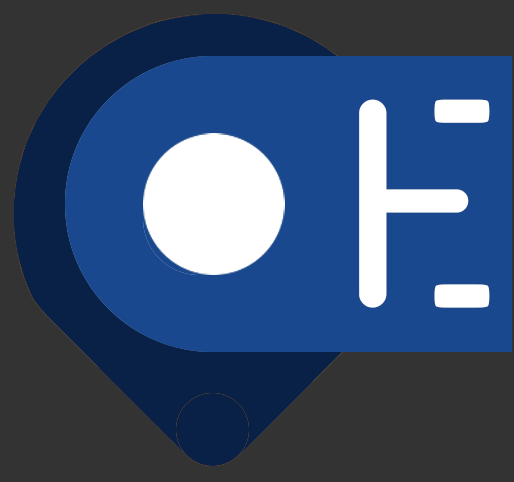
<style>
.page{position:relative;width:514px;height:482px;background:#1a488e}
.page>*{position:absolute;margin:0}
.t1{font:288.2px "Avayx";color:#ffffff}
</style>
<div class="page">
<p class="t1" style="left:359px;top:99px;width:131px;height:209px">E</p>
</div>
